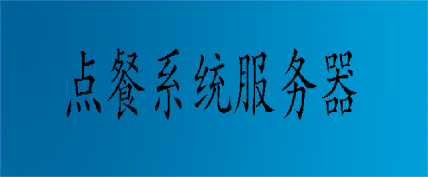
<style>
.page{position:relative;width:428px;height:177px}
.page>*{position:absolute;margin:0}
.t1{font:79.7px "¿¬Ìå";color:#000000;scale:0.54 1}
</style>
<div class="page">
<p class="t1" style="left:66px;top:48px;width:291px;height:72px">点餐系统服务器</p>
</div>
